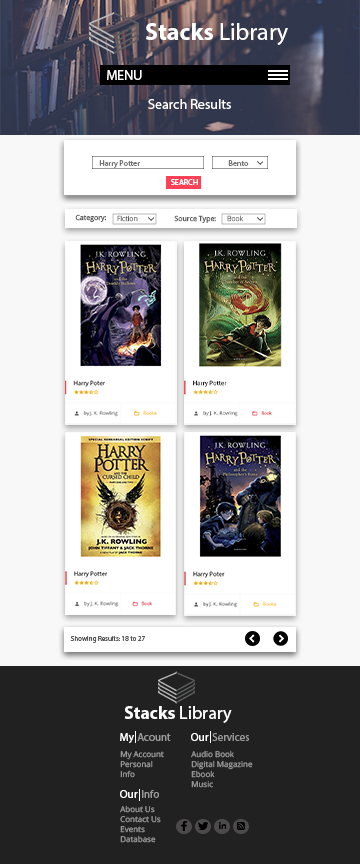
<style>
.page{position:relative;width:360px;height:864px;background:#212121}
.page>*{position:absolute;margin:0}
.t1{font:24px "MyriadPro-Regular";color:#ffffff}
.t2{font:24px "MyriadPro-Bold";color:#ffffff}
.t3{font:14px "MyriadPro-Regular";color:#ffffff}
.t4{font:8px "MyriadPro-Regular";color:#777474}
.t5{font:8px "MyriadPro-Regular";color:#ffffff}
.t6{font:7px "OpenSans";color:#5a5a5a}
.t7{font:7px "OpenSans-Light";color:#5a5a5a}
.t8{font:7px "OpenSans-Light"}
.t9{font:7px "MyriadPro-Regular";color:#5a5a5a}
.t10{font:18px "MyriadPro-Regular";color:#ffffff}
.t11{font:18px "MyriadPro-Bold";color:#ffffff}
.t12{font:11px "MyriadPro-Regular";color:#ffffff}
.t13{font:11px "MyriadPro-Regular";color:#999999}
.t14{font:8px/10px "OpenSans"}
</style>
<div class="page">
<p class="t1" style="left:146px;top:23px;width:142px;height:22px"><span class="t2">Stacks</span> Library</p>
<p class="t3" style="left:107px;top:70px;width:35px;height:10px">MENU</p>
<p class="t3" style="left:148px;top:99px;width:83px;height:10px">Search Results</p>
<p class="t4" style="left:99px;top:160px;width:42px;height:8px">Harry Potter</p>
<p class="t4" style="left:228px;top:160px;width:21px;height:6px">Bento</p>
<p class="t5" style="left:171px;top:179px;width:27px;height:6px">SEARCH</p>
<p class="t6" style="left:75px;top:214px;width:31px;height:8px">Category:</p>
<p class="t7" style="left:117px;top:215px;width:21px;height:7px">Fiction</p>
<p class="t6" style="left:174px;top:215px;width:42px;height:8px">Source Type:</p>
<p class="t8" style="left:227px;top:215px;width:17px;height:7px">Book</p>
<p class="t9" style="left:70px;top:636px;width:75px;height:7px">Showing Results: 18 to 27</p>
<p class="t10" style="left:124px;top:706px;width:108px;height:17px"><span class="t11">Stacks</span> Library</p>
<p class="t12" style="left:120px;top:733px;width:14px;height:10px">My</p>
<p class="t13" style="left:137px;top:733px;width:34px;height:8px">Acount</p>
<p class="t12" style="left:191px;top:733px;width:18px;height:8px">Our</p>
<p class="t13" style="left:212px;top:733px;width:37px;height:8px">Services</p>
<p class="t14" style="left:191px;top:750px;width:62px;height:38px">Audio Book<br>Digital Magazine<br>Ebook<br>Music</p>
<p class="t14" style="left:120px;top:751px;width:44px;height:27px">My Account<br>Personal Info<br>My Saved List</p>
<p class="t12" style="left:120px;top:790px;width:18px;height:8px">Our</p>
<p class="t13" style="left:142px;top:790px;width:17px;height:8px">Info</p>
<p class="t14" style="left:120px;top:805px;width:41px;height:38px">About Us<br>Contact Us<br>Events<br>Database</p>
</div>
